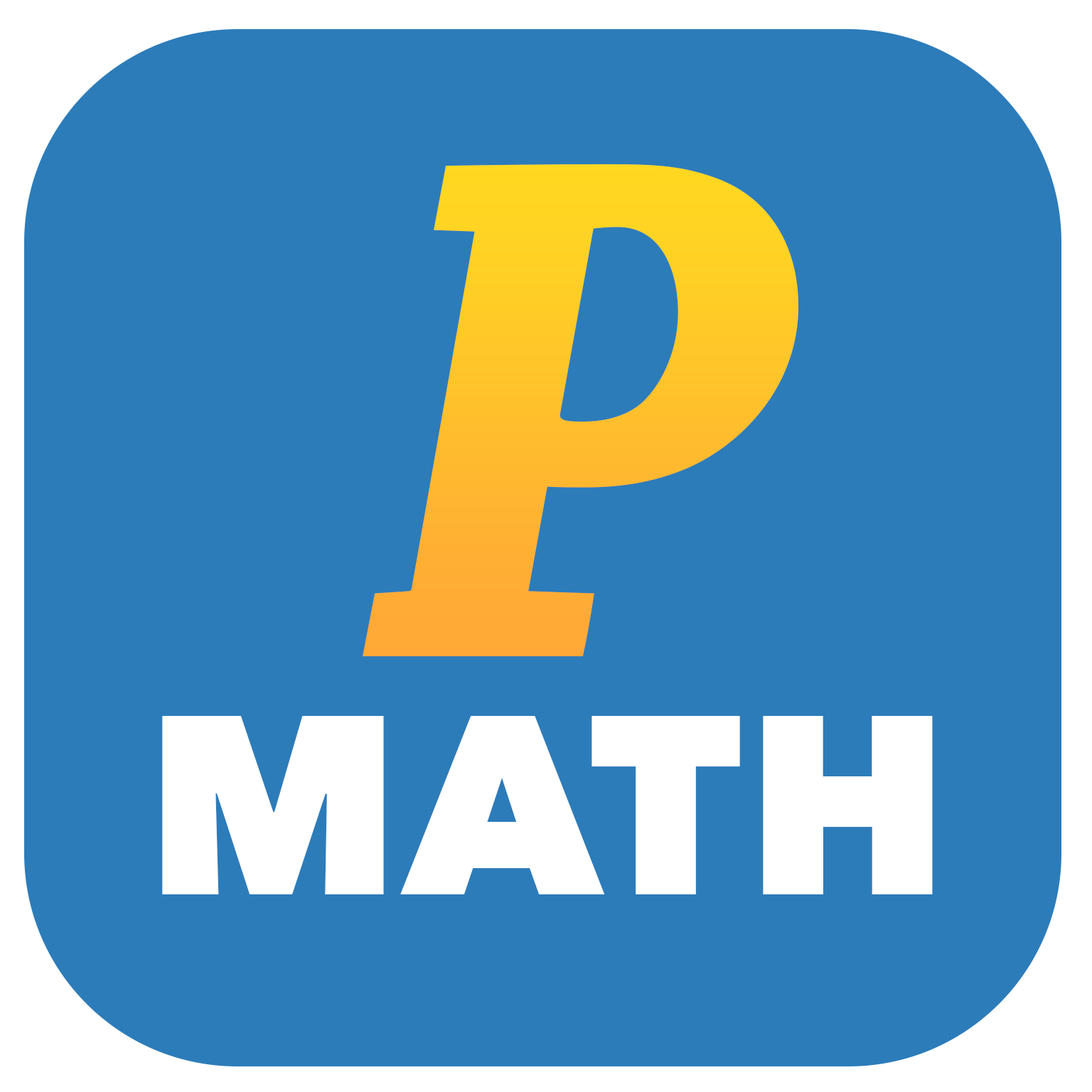
<style>
.page{position:relative;width:1092px;height:1092px;background:#2c7cba}
.page>*{position:absolute;margin:0}
.t1{font:756.3px "ChaparralPro-BoldIt";letter-spacing:0.003em;color:#ffc42a}
.t2{font:252.1px "AvenirNext-Heavy";letter-spacing:0.02em;color:#ffffff}
</style>
<div class="page">
<p class="t1" style="left:363px;top:164px;width:435px;height:493px">P</p>
<p class="t2" style="left:162px;top:716px;width:771px;height:178px">MATH</p>
</div>
